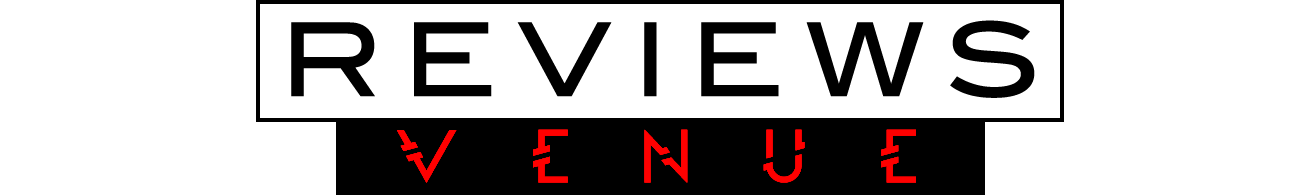
<style>
.page{position:relative;width:1300px;height:195px;background:#ffffff}
.page>*{position:absolute;margin:0}
.t1{font:101.6px "BlairMdITCTTMedium";letter-spacing:0.2em;color:#000000}
.t2{font:70px "Moondance";letter-spacing:1em;color:#ff0000}
</style>
<div class="page">
<p class="t1" style="left:291px;top:20px;width:744px;height:78px">REVIEWS</p>
<p class="t2" style="left:397px;top:129px;width:519px;height:54px">VENUE</p>
</div>
